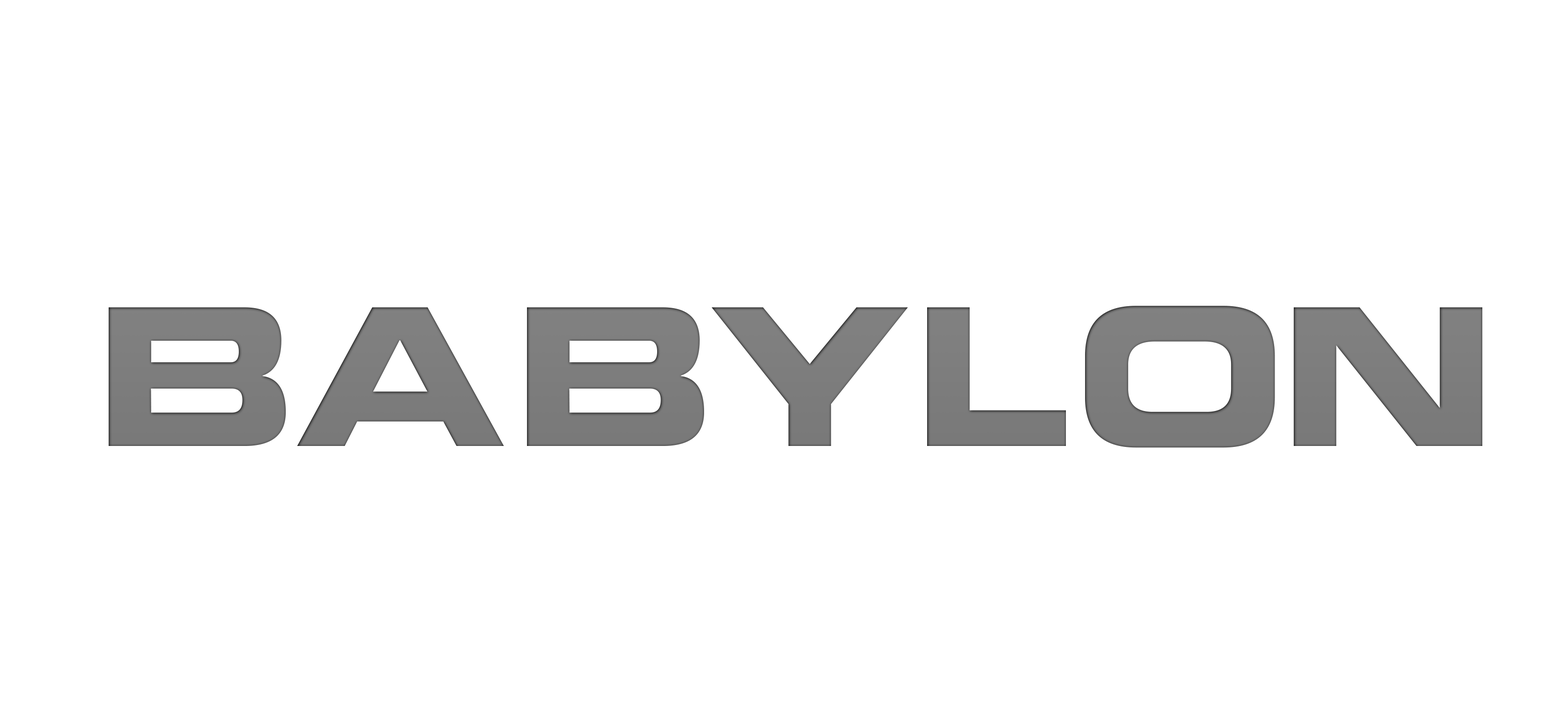
<style>
.page{position:relative;width:1568px;height:712px;background:#ffffff}
.page>*{position:absolute;margin:0}
.t1{font:191.5px "Criovision-Font";color:#818181}
</style>
<div class="page">
<p class="t1" style="left:109px;top:306px;width:1373px;height:142px">Babylon</p>
</div>
